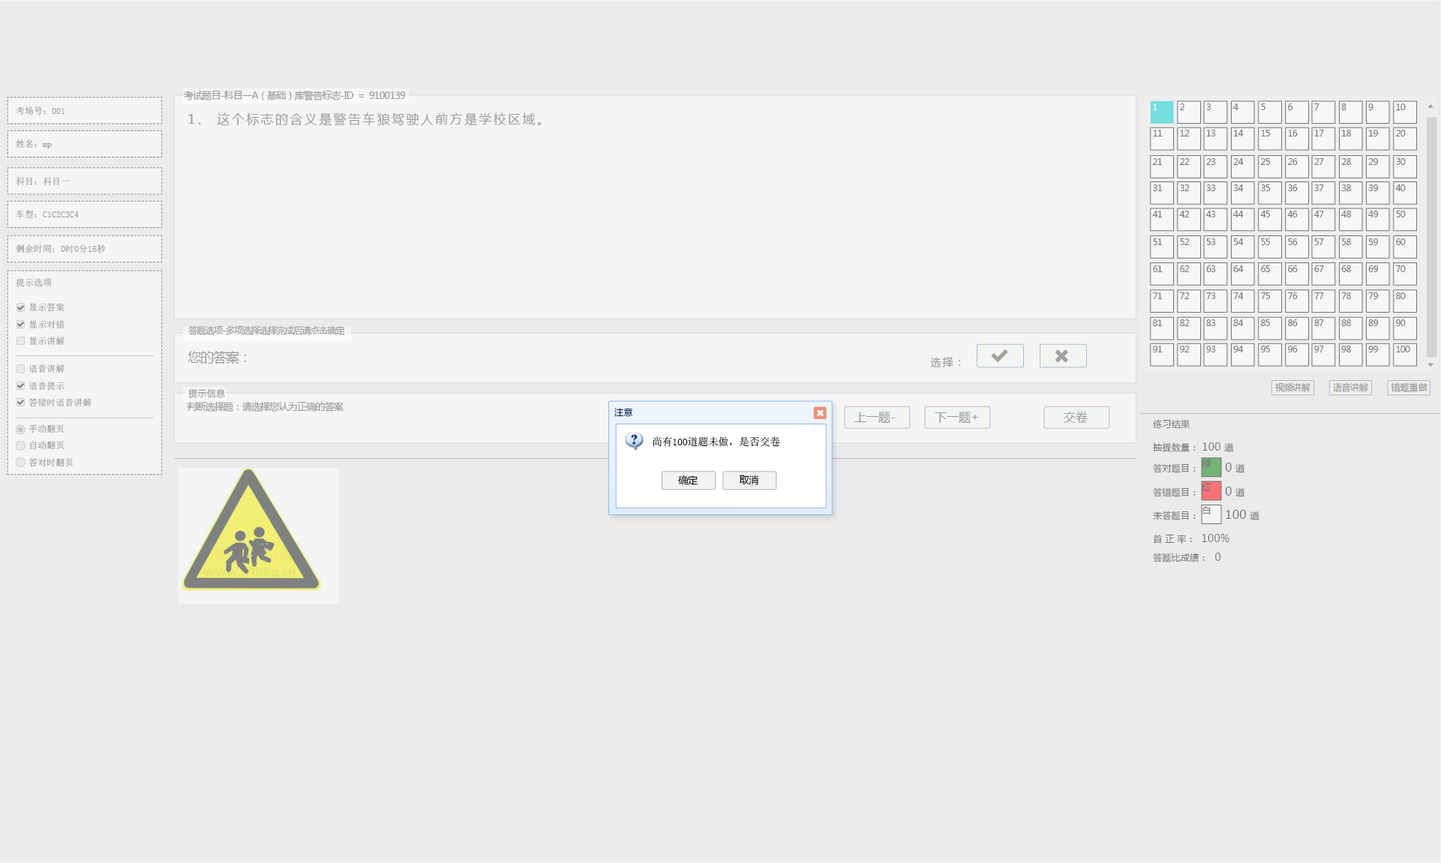
<style>
.page{position:relative;width:1441px;height:863px;background:#ebebeb}
.page>*{position:absolute;margin:0}
.t1{font:9.8px "MicrosoftYaHei";letter-spacing:-0.06em;color:#9a9a9a}
.t2{font:9px "SimSun";color:#9a9a9a}
.t3{font:12.8px "MicrosoftYaHei";letter-spacing:0.14em;color:#9a9a9a}
.t4{font:9px "MicrosoftYaHei";letter-spacing:-0.06em;color:#ffffff}
.t5{font:9px "MicrosoftYaHei";letter-spacing:-0.06em;color:#757574}
.t6{font:9px "SimSun"}
.t7{font:9px/16.8px "SimSun"}
.t8{font:9px "MicrosoftYaHei";letter-spacing:-0.06em;color:#9a9a9a}
.t9{font:13.5px "MicrosoftYaHei";letter-spacing:-0.06em;color:#9a9a9a}
.t10{font:10.5px "MicrosoftYaHei";letter-spacing:0.14em;color:#9a9a9a}
.t11{font:9px "MicrosoftYaHei";letter-spacing:0.02em;color:#9e9e9e}
.t12{font:9px "MicrosoftYaHei";letter-spacing:-0.04em;color:#969695}
.t13{font:9px "MicrosoftYaHei";color:#969695}
.t14{font:9px "MicrosoftYaHei";letter-spacing:0.04em;color:#0d2d61}
.t15{font:12px "MicrosoftYaHei";color:#9a9a98}
.t16{font:9px "MicrosoftYaHei";letter-spacing:0.02em;color:#737373}
.t17{font:10.5px "SimSun";letter-spacing:-0.02em;color:#000000}
.t18{font:10.5px "MicrosoftYaHei";letter-spacing:0.02em;color:#737373}
.t19{font:12px "MicrosoftYaHei";letter-spacing:0.02em;color:#737373}
.t20{font:9.8px "MicrosoftYaHei";letter-spacing:-0.04em;color:#000000}
.t21{font:9px/7.8px "MicrosoftYaHei";letter-spacing:0.02em;color:#737373}
.t22{font:10.5px/9.6px "MicrosoftYaHei";letter-spacing:0.02em;color:#737373}
.t23{font:9px/9.6px "MicrosoftYaHei";letter-spacing:0.02em;color:#737373}
</style>
<div class="page">
<p class="t1" style="left:184px;top:91px;width:221px;height:10px">考试题目-科目一A（基础）库警告标志-ID  =  9100139</p>
<p class="t2" style="left:16px;top:106px;width:48px;height:10px">考场号：001</p>
<p class="t3" style="left:188px;top:112px;width:353px;height:14px">1、 这个标志的含义是警告车狼驾驶人前方是学校区域。</p>
<p class="t4" style="left:1153px;top:104px;width:4px;height:6px">1</p>
<p class="t5" style="left:1180px;top:104px;width:4px;height:6px">2</p>
<p class="t5" style="left:1206px;top:104px;width:4px;height:6px">3</p>
<p class="t5" style="left:1233px;top:104px;width:5px;height:6px">4</p>
<p class="t5" style="left:1261px;top:104px;width:4px;height:6px">5</p>
<p class="t5" style="left:1288px;top:104px;width:5px;height:6px">6</p>
<p class="t5" style="left:1314px;top:104px;width:5px;height:6px">7</p>
<p class="t5" style="left:1341px;top:104px;width:5px;height:6px">8</p>
<p class="t5" style="left:1368px;top:104px;width:5px;height:6px">9</p>
<p class="t5" style="left:1396px;top:104px;width:10px;height:6px">10</p>
<p class="t5" style="left:1153px;top:130px;width:9px;height:6px">11</p>
<p class="t5" style="left:1180px;top:130px;width:10px;height:6px">12</p>
<p class="t5" style="left:1206px;top:130px;width:10px;height:6px">13</p>
<p class="t5" style="left:1233px;top:130px;width:11px;height:6px">14</p>
<p class="t5" style="left:1261px;top:130px;width:9px;height:6px">15</p>
<p class="t5" style="left:1288px;top:130px;width:10px;height:6px">16</p>
<p class="t5" style="left:1314px;top:130px;width:10px;height:6px">17</p>
<p class="t5" style="left:1341px;top:130px;width:10px;height:6px">18</p>
<p class="t5" style="left:1368px;top:130px;width:10px;height:6px">19</p>
<p class="t5" style="left:1396px;top:130px;width:10px;height:6px">20</p>
<p class="t2" style="left:16px;top:140px;width:36px;height:8px">姓名：mp</p>
<p class="t5" style="left:1153px;top:158px;width:9px;height:7px">21</p>
<p class="t5" style="left:1180px;top:158px;width:10px;height:7px">22</p>
<p class="t5" style="left:1206px;top:158px;width:10px;height:7px">23</p>
<p class="t5" style="left:1233px;top:158px;width:11px;height:7px">24</p>
<p class="t5" style="left:1261px;top:158px;width:9px;height:7px">25</p>
<p class="t5" style="left:1288px;top:158px;width:10px;height:7px">26</p>
<p class="t5" style="left:1314px;top:158px;width:10px;height:7px">27</p>
<p class="t5" style="left:1341px;top:158px;width:10px;height:7px">28</p>
<p class="t5" style="left:1368px;top:158px;width:10px;height:7px">29</p>
<p class="t5" style="left:1396px;top:158px;width:10px;height:7px">30</p>
<p class="t2" style="left:16px;top:177px;width:54px;height:9px">科目：科目一</p>
<p class="t5" style="left:1153px;top:184px;width:9px;height:7px">31</p>
<p class="t5" style="left:1180px;top:184px;width:10px;height:7px">32</p>
<p class="t5" style="left:1206px;top:184px;width:10px;height:7px">33</p>
<p class="t5" style="left:1233px;top:184px;width:11px;height:7px">34</p>
<p class="t5" style="left:1261px;top:184px;width:9px;height:7px">35</p>
<p class="t5" style="left:1288px;top:184px;width:10px;height:7px">36</p>
<p class="t5" style="left:1314px;top:184px;width:10px;height:7px">37</p>
<p class="t5" style="left:1341px;top:184px;width:10px;height:7px">38</p>
<p class="t5" style="left:1368px;top:184px;width:10px;height:7px">39</p>
<p class="t5" style="left:1395px;top:184px;width:11px;height:7px">40</p>
<p class="t2" style="left:16px;top:210px;width:63px;height:9px">车型：C1C2C3C4</p>
<p class="t5" style="left:1152px;top:211px;width:10px;height:7px">41</p>
<p class="t5" style="left:1179px;top:211px;width:11px;height:7px">42</p>
<p class="t5" style="left:1205px;top:211px;width:11px;height:7px">43</p>
<p class="t5" style="left:1233px;top:211px;width:11px;height:7px">44</p>
<p class="t5" style="left:1260px;top:211px;width:10px;height:7px">45</p>
<p class="t5" style="left:1287px;top:211px;width:11px;height:7px">46</p>
<p class="t5" style="left:1313px;top:211px;width:11px;height:7px">47</p>
<p class="t5" style="left:1341px;top:211px;width:10px;height:7px">48</p>
<p class="t5" style="left:1368px;top:211px;width:10px;height:7px">49</p>
<p class="t5" style="left:1396px;top:211px;width:10px;height:7px">50</p>
<p class="t2" style="left:16px;top:244px;width:90px;height:10px">剩余时间：0时0分16秒</p>
<p class="t5" style="left:1153px;top:238px;width:9px;height:7px">51</p>
<p class="t5" style="left:1180px;top:238px;width:10px;height:7px">52</p>
<p class="t5" style="left:1206px;top:238px;width:10px;height:7px">53</p>
<p class="t5" style="left:1233px;top:238px;width:11px;height:7px">54</p>
<p class="t5" style="left:1261px;top:238px;width:9px;height:7px">55</p>
<p class="t5" style="left:1288px;top:238px;width:10px;height:7px">56</p>
<p class="t5" style="left:1314px;top:238px;width:10px;height:7px">57</p>
<p class="t5" style="left:1341px;top:238px;width:10px;height:7px">58</p>
<p class="t5" style="left:1368px;top:238px;width:10px;height:7px">59</p>
<p class="t5" style="left:1396px;top:238px;width:10px;height:7px">60</p>
<p class="t5" style="left:1153px;top:266px;width:9px;height:6px">61</p>
<p class="t5" style="left:1180px;top:266px;width:10px;height:6px">62</p>
<p class="t5" style="left:1206px;top:266px;width:10px;height:6px">63</p>
<p class="t5" style="left:1233px;top:266px;width:11px;height:6px">64</p>
<p class="t5" style="left:1261px;top:266px;width:9px;height:6px">65</p>
<p class="t5" style="left:1288px;top:266px;width:10px;height:6px">66</p>
<p class="t5" style="left:1314px;top:266px;width:10px;height:6px">67</p>
<p class="t5" style="left:1341px;top:266px;width:10px;height:6px">68</p>
<p class="t5" style="left:1368px;top:266px;width:10px;height:6px">69</p>
<p class="t5" style="left:1395px;top:266px;width:11px;height:6px">70</p>
<p class="t6" style="left:16px;top:278px;width:36px;height:9px">提示选项</p>
<p class="t5" style="left:1152px;top:292px;width:10px;height:7px">71</p>
<p class="t5" style="left:1179px;top:292px;width:11px;height:7px">72</p>
<p class="t5" style="left:1206px;top:292px;width:10px;height:7px">73</p>
<p class="t5" style="left:1233px;top:292px;width:11px;height:7px">74</p>
<p class="t5" style="left:1260px;top:292px;width:10px;height:7px">75</p>
<p class="t5" style="left:1287px;top:292px;width:11px;height:7px">76</p>
<p class="t5" style="left:1314px;top:292px;width:10px;height:7px">77</p>
<p class="t5" style="left:1341px;top:292px;width:10px;height:7px">78</p>
<p class="t5" style="left:1368px;top:292px;width:10px;height:7px">79</p>
<p class="t5" style="left:1396px;top:292px;width:10px;height:7px">80</p>
<p class="t7" style="left:29px;top:303px;width:35px;height:43px">显示答案<br>显示对错<br>显示讲解</p>
<p class="t8" style="left:188px;top:326px;width:157px;height:9px">答题选项-多项选择选择完成后请点击确定</p>
<p class="t5" style="left:1153px;top:320px;width:9px;height:6px">81</p>
<p class="t5" style="left:1180px;top:320px;width:10px;height:6px">82</p>
<p class="t5" style="left:1206px;top:320px;width:10px;height:6px">83</p>
<p class="t5" style="left:1233px;top:320px;width:11px;height:6px">84</p>
<p class="t5" style="left:1261px;top:320px;width:9px;height:6px">85</p>
<p class="t5" style="left:1288px;top:320px;width:10px;height:6px">86</p>
<p class="t5" style="left:1314px;top:320px;width:10px;height:6px">87</p>
<p class="t5" style="left:1341px;top:320px;width:10px;height:6px">88</p>
<p class="t5" style="left:1368px;top:320px;width:10px;height:6px">89</p>
<p class="t5" style="left:1396px;top:320px;width:10px;height:6px">90</p>
<p class="t9" style="left:188px;top:350px;width:59px;height:14px">您的答案：</p>
<p class="t5" style="left:1153px;top:346px;width:9px;height:6px">91</p>
<p class="t5" style="left:1180px;top:346px;width:10px;height:6px">92</p>
<p class="t5" style="left:1206px;top:346px;width:10px;height:6px">93</p>
<p class="t5" style="left:1233px;top:346px;width:11px;height:6px">94</p>
<p class="t5" style="left:1261px;top:346px;width:9px;height:6px">95</p>
<p class="t5" style="left:1288px;top:346px;width:10px;height:6px">96</p>
<p class="t5" style="left:1314px;top:346px;width:10px;height:6px">97</p>
<p class="t5" style="left:1341px;top:346px;width:10px;height:6px">98</p>
<p class="t5" style="left:1368px;top:346px;width:10px;height:6px">99</p>
<p class="t5" style="left:1396px;top:346px;width:14px;height:6px">100</p>
<p class="t7" style="left:28px;top:364px;width:64px;height:43px">语音讲解<br>语音提示<br>答错时语音讲解</p>
<p class="t10" style="left:930px;top:357px;width:31px;height:11px">选择：</p>
<p class="t11" style="left:188px;top:388px;width:37px;height:10px">提示信息</p>
<p class="t12" style="left:1275px;top:383px;width:35px;height:9px">视频讲解</p>
<p class="t12" style="left:1333px;top:382px;width:35px;height:10px">语音讲解</p>
<p class="t13" style="left:1390px;top:382px;width:37px;height:10px">错题重做</p>
<p class="t1" style="left:187px;top:401px;width:157px;height:11px">判断选择题：请选择您认为正确的答案</p>
<p class="t14" style="left:614px;top:408px;width:19px;height:9px">注意</p>
<p class="t15" style="left:854px;top:412px;width:41px;height:11px">上一题-</p>
<p class="t15" style="left:934px;top:412px;width:45px;height:11px">下一题+</p>
<p class="t15" style="left:1064px;top:411px;width:24px;height:12px">交卷</p>
<p class="t7" style="left:28px;top:424px;width:45px;height:43px">手动翻页<br>自动翻页<br>答对时翻页</p>
<p class="t16" style="left:1153px;top:419px;width:37px;height:10px">练习结果</p>
<p class="t17" style="left:652px;top:436px;width:128px;height:11px">尚有100道题未做，是否交卷</p>
<p class="t16" style="left:1153px;top:442px;width:81px;height:10px">抽提数量： <span class="t18">100 </span>道</p>
<p class="t16" style="left:1202px;top:459px;width:9px;height:9px">绿</p>
<p class="t16" style="left:1153px;top:464px;width:43px;height:9px">答对题目：</p>
<p class="t19" style="left:1225px;top:463px;width:19px;height:10px">0 <span class="t16">道</span></p>
<p class="t20" style="left:678px;top:476px;width:20px;height:9px">确定</p>
<p class="t20" style="left:739px;top:475px;width:19px;height:10px">取消</p>
<p class="t16" style="left:1202px;top:482px;width:9px;height:10px">红</p>
<p class="t16" style="left:1153px;top:488px;width:43px;height:9px">答错题目：</p>
<p class="t19" style="left:1225px;top:487px;width:19px;height:10px">0 <span class="t16">道</span></p>
<p class="t16" style="left:1202px;top:506px;width:8px;height:8px">白</p>
<p class="t19" style="left:1226px;top:510px;width:33px;height:10px">100 <span class="t16">道</span></p>
<p class="t16" style="left:1153px;top:511px;width:43px;height:9px">未答题目：</p>
<p class="t21" style="left:1153px;top:534px;width:76px;height:28px">首 正 率：  <span class="t22">100%<br><br></span><span class="t23">答题比成绩：</span><span class="t22">  0</span></p>
</div>
